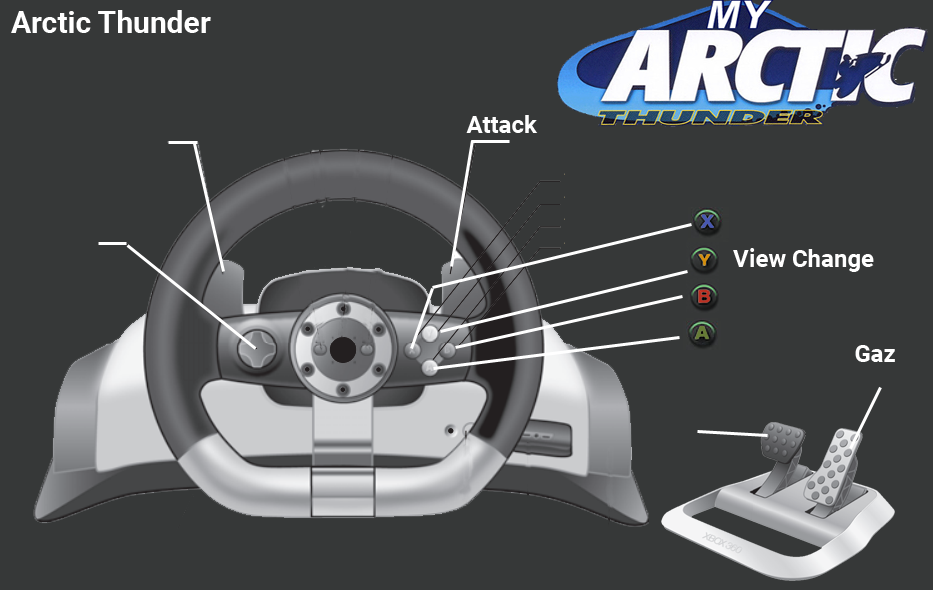
<style>
.page{position:relative;width:933px;height:590px;background:#363838}
.page>*{position:absolute;margin:0}
.t1{font:30px "Roboto-Bold";color:#ffffff}
.t2{font:24px "Roboto-Bold";color:#ffffff}
</style>
<div class="page">
<p class="t1" style="left:11px;top:10px;width:200px;height:23px">Arctic Thunder</p>
<p class="t2" style="left:466px;top:115px;width:72px;height:18px">Attack</p>
<p class="t2" style="left:733px;top:248px;width:141px;height:24px">View Change</p>
<p class="t2" style="left:855px;top:345px;width:40px;height:17px">Gaz</p>
</div>
